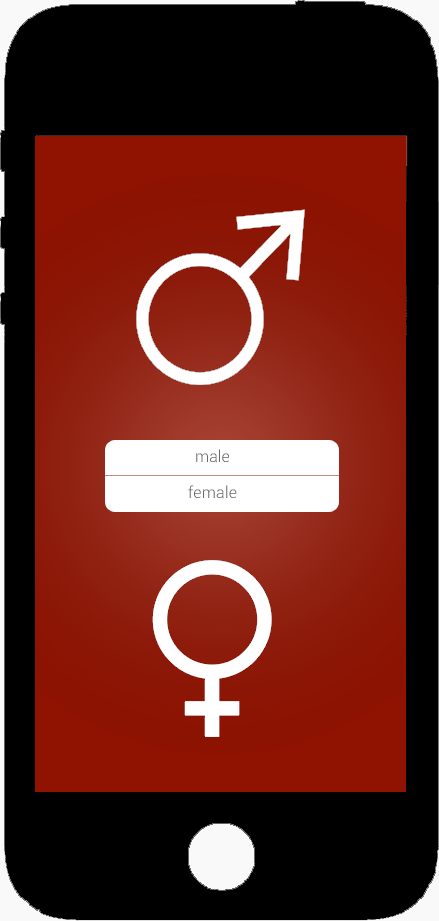
<style>
.page{position:relative;width:439px;height:921px;background:#000000}
.page>*{position:absolute;margin:0}
.t1{font:16px "Roboto-Light";color:#676767}
.t2{font:16px "Roboto-Light";letter-spacing:0.015em;color:#666666}
</style>
<div class="page">
<p class="t1" style="left:196px;top:449px;width:33px;height:14px">male</p>
<p class="t2" style="left:188px;top:485px;width:49px;height:14px">female</p>
</div>
